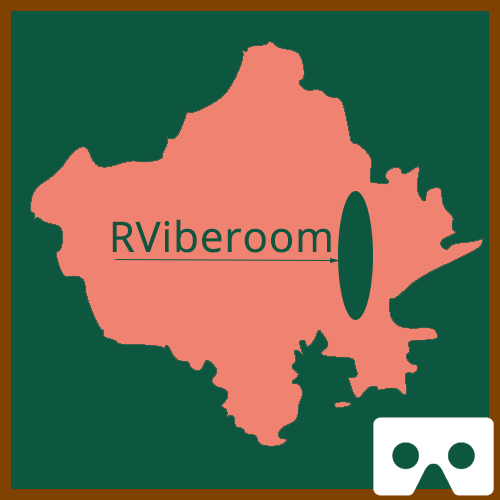
<style>
.page{position:relative;width:500px;height:500px;background:#0d5740}
.page>*{position:absolute;margin:0}
.t1{font:41.7px "OpenSans-Regular";color:#0d5740;font-weight:bold}
</style>
<div class="page">
<p class="t1" style="left:112px;top:219px;width:219px;height:34px">RViberoom</p>
</div>
